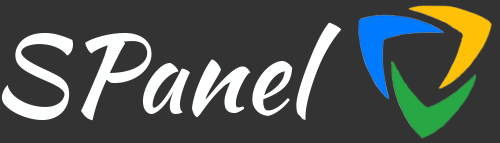
<style>
.page{position:relative;width:500px;height:143px;background:#333333}
.page>*{position:absolute;margin:0}
.t1{font:108px "KaushanScript-Regular";color:#feffff}
</style>
<div class="page">
<p class="t1" style="left:1px;top:22px;width:341px;height:99px">SPanel</p>
</div>
